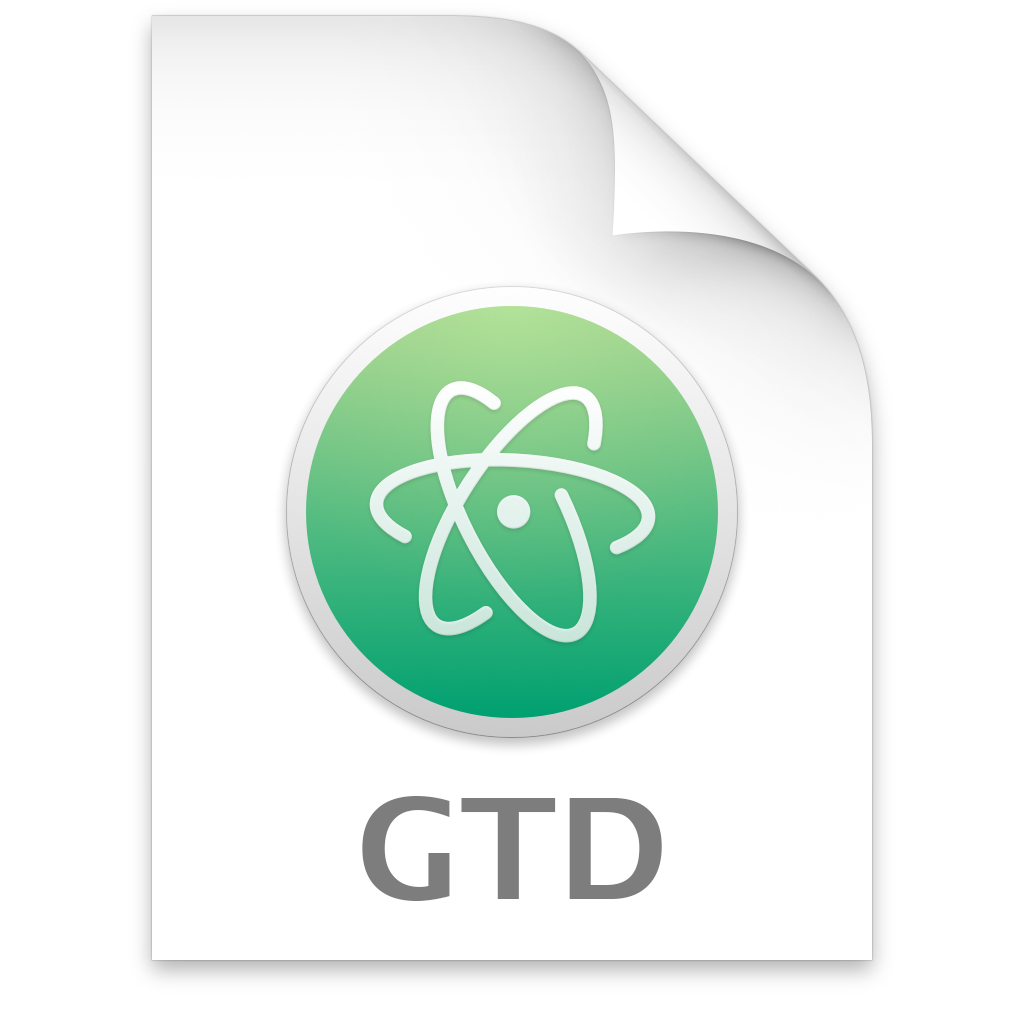
<style>
.page{position:relative;width:1024px;height:1024px;background:#ffffff}
.page>*{position:absolute;margin:0}
.t1{font:140px "LucidaGrande-Bold";color:#7d7d7d}
</style>
<div class="page">
<p class="t1" style="left:362px;top:796px;width:300px;height:105px">GTD</p>
</div>
